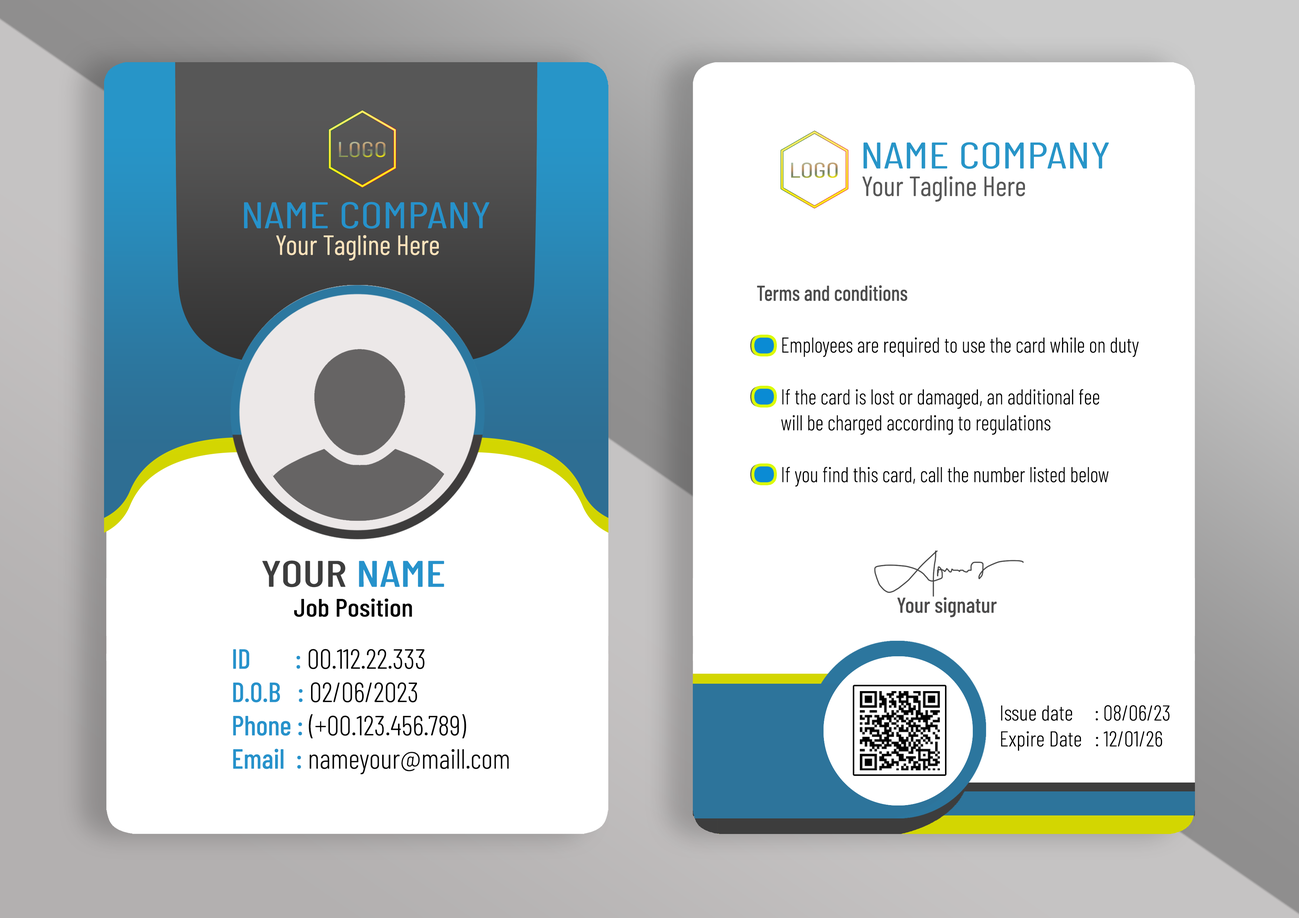
<style>
.page{position:relative;width:1299px;height:918px;background:#ffffff}
.page>*{position:absolute;margin:0}
.t1{font:21.3px "BarlowCondensed-Regular";scale:1.33 1}
.t2{font:37px "BarlowCondensed-Regular";color:#2795c8;scale:1.3 1}
.t3{font:27.8px "BarlowCondensed-Regular";color:#575757}
.t4{font:37px "BarlowCondensed-Regular";color:#2692cb;scale:1.3 1}
.t5{font:27.8px "BarlowCondensed-Regular";color:#fce3bc}
.t6{font:21.6px "BarlowCondensed-Light";color:#000000;scale:0.94 1}
.t7{font:21.6px "BarlowCondensed-Medium";color:#4c4c4c;scale:0.94 1}
.t8{font:37px "BarlowCondensed-Medium";color:#3d3d3d;scale:1.27 1}
.t9{font:37px "BarlowCondensed-Medium";color:#2692cb;scale:1.27 1}
.t10{font:25.2px "BarlowCondensed-Medium";color:#000000;scale:1.1 1}
.t11{font:21.6px "BarlowCondensed-Medium";color:#4b4a4a}
.t12{font:27.8px "BarlowCondensed-Light";color:#020202}
.t13{font:27.8px "BarlowCondensed-Medium";color:#2692cb}
.t14{font:27.8px "BarlowCondensed-Light";color:#000000}
.t15{font:21.6px "BarlowCondensed-Light";color:#000000}
</style>
<div class="page">
<p class="t1" style="left:339px;top:142px;width:46px;height:15px">LOGO</p>
<p class="t2" style="left:863px;top:142px;width:246px;height:27px">NAME COMPANY</p>
<p class="t1" style="left:791px;top:163px;width:46px;height:15px">LOGO</p>
<p class="t3" style="left:862px;top:176px;width:163px;height:26px">Your Tagline Here</p>
<p class="t4" style="left:244px;top:202px;width:245px;height:27px">NAME COMPANY</p>
<p class="t5" style="left:276px;top:235px;width:163px;height:26px">Your Tagline Here</p>
<p class="t6" style="left:757px;top:285px;width:381px;height:202px"><span class="t7">Terms and conditions<br><br></span>      Employees are required to use the card while on duty<br><br>      If the card is lost or damaged, an additional fee <br>      will be charged according to regulations<br><br>      If you find this card, call the number listed below</p>
<p class="t8" style="left:262px;top:561px;width:182px;height:27px">YOUR<span class="t9"> NAME</span></p>
<p class="t10" style="left:294px;top:599px;width:118px;height:18px">Job Position</p>
<p class="t11" style="left:897px;top:597px;width:100px;height:21px">Your signatur</p>
<p class="t12" style="left:233px;top:649px;width:276px;height:126px"><span class="t13">ID        : </span><span class="t14">00.112.22.333<br></span><span class="t13">D.O.B   : </span><span class="t14">02/06/2023<br></span><span class="t13">Phone : </span>(+00.123.456.789)<br><span class="t13">Email  : </span>nameyour@maill.com</p>
<p class="t15" style="left:1001px;top:705px;width:169px;height:46px">Issue date     : 08/06/23<br>Expire Date   : 12/01/26</p>
</div>
